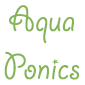
<style>
.page{position:relative;width:85px;height:85px;background:#ffffff}
.page>*{position:absolute;margin:0}
.t1{font:40px "GiddyupStd";color:#85b357}
</style>
<div class="page">
<p class="t1" style="left:4px;top:5px;width:76px;height:75px;text-align:center">Aqua<br>Ponics</p>
</div>
